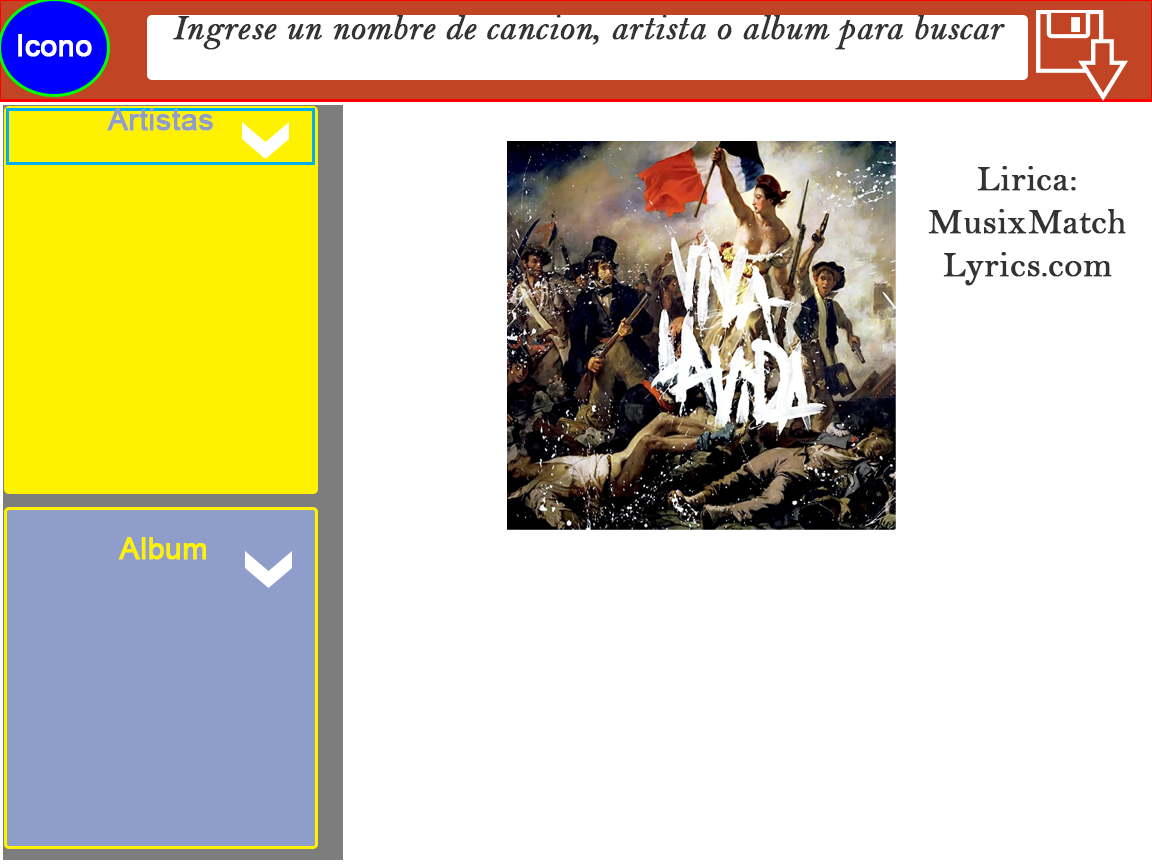
<style>
.page{position:relative;width:1152px;height:864px;background:#ffffff}
.page>*{position:absolute;margin:0}
.t1{font:36px "BellMTItalic";color:#333333;font-weight:bold}
.t2{font:30px "ArialMT";color:#ffffff;font-weight:bold}
.t3{font:30px "ArialMT";color:#8f9dca;font-weight:bold}
.t4{font:36px "BellMT";color:#333333;font-weight:bold}
.t5{font:30px "ArialMT";color:#fff200;font-weight:bold}
</style>
<div class="page">
<p class="t1" style="left:173px;top:15px;width:832px;height:35px">Ingrese un nombre de cancion, artista o album para buscar</p>
<p class="t2" style="left:18px;top:34px;width:74px;height:23px">Icono</p>
<p class="t3" style="left:107px;top:108px;width:106px;height:23px">Artistas</p>
<p class="t4" style="left:928px;top:166px;width:198px;height:120px;text-align:center">Lirica:<br>MusixMatch<br>Lyrics.com</p>
<p class="t5" style="left:118px;top:537px;width:88px;height:23px">Album</p>
</div>
